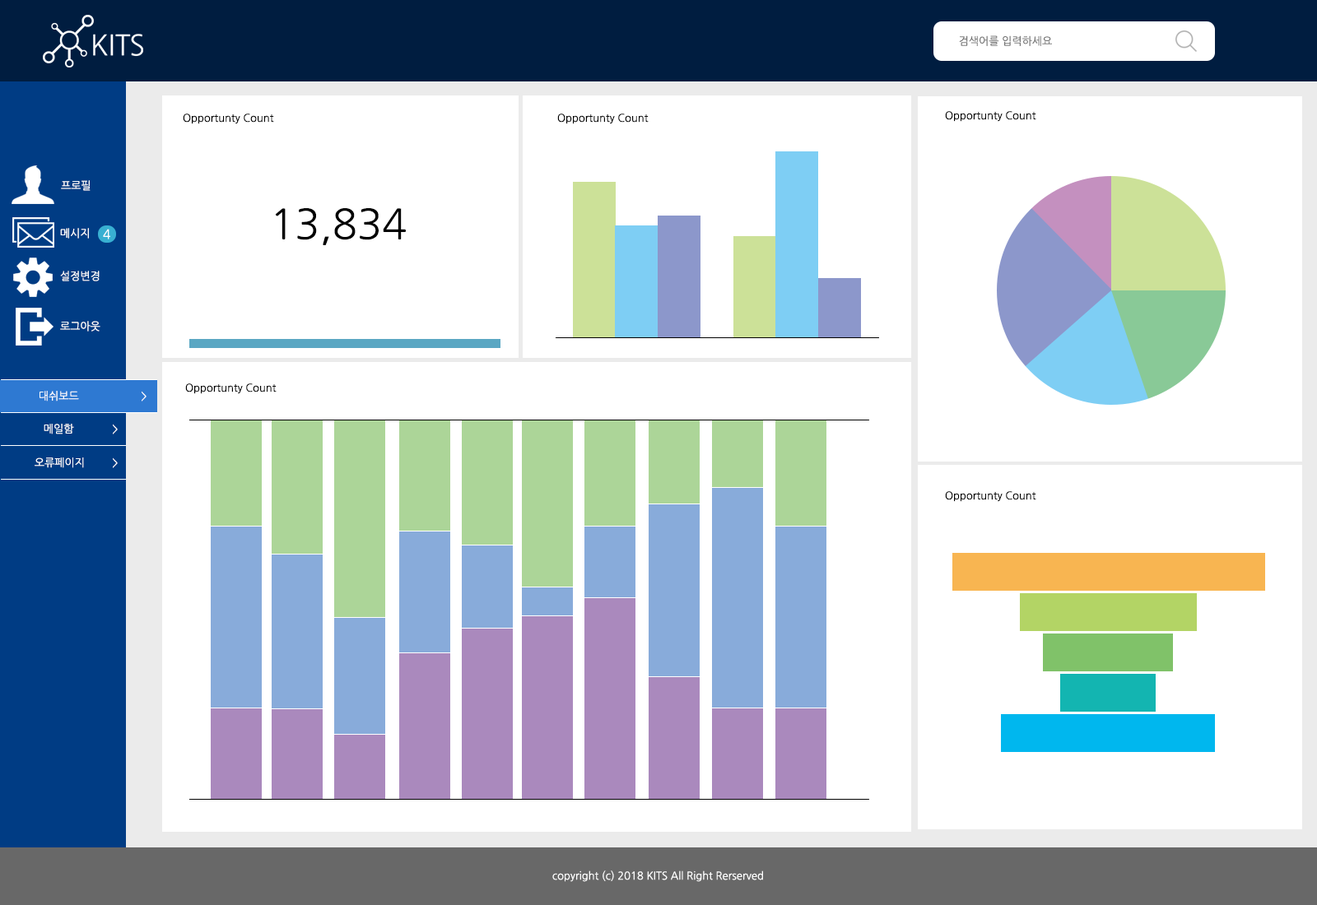
<style>
.page{position:relative;width:1317px;height:905px;background:#ffffff}
.page>*{position:absolute;margin:0}
.t1{font:10.7px "NanumGothic";color:#737373}
.t2{font:10.7px "NanumGothic";color:#000000}
.t3{font:10.7px "NanumGothic";color:#ffffff}
.t4{font:41.2px "NanumGothic";color:#000000}
.t5{font:12.8px "NanumGothic";color:#ffffff}
</style>
<div class="page">
<p class="t1" style="left:959px;top:35px;width:93px;height:11px">검색어를 입력하세요</p>
<p class="t2" style="left:183px;top:114px;width:91px;height:10px">Opportunty Count</p>
<p class="t2" style="left:557px;top:114px;width:92px;height:10px">Opportunty Count</p>
<p class="t2" style="left:945px;top:111px;width:91px;height:11px">Opportunty Count</p>
<p class="t3" style="left:61px;top:180px;width:30px;height:11px">프로필</p>
<p class="t4" style="left:275px;top:208px;width:131px;height:37px">13,834</p>
<p class="t3" style="left:60px;top:228px;width:29px;height:11px">메시지</p>
<p class="t5" style="left:103px;top:229px;width:7px;height:11px">4</p>
<p class="t3" style="left:60px;top:271px;width:40px;height:11px">설정변경</p>
<p class="t3" style="left:60px;top:321px;width:40px;height:11px">로그아웃</p>
<p class="t2" style="left:185px;top:384px;width:92px;height:10px">Opportunty Count</p>
<p class="t3" style="left:40px;top:391px;width:39px;height:11px">대쉬보드</p>
<p class="t3" style="left:142px;top:391px;width:5px;height:11px">&gt;</p>
<p class="t3" style="left:44px;top:424px;width:30px;height:11px">메일함</p>
<p class="t3" style="left:113px;top:424px;width:5px;height:11px">&gt;</p>
<p class="t3" style="left:35px;top:458px;width:49px;height:10px">오류페이지</p>
<p class="t3" style="left:113px;top:458px;width:5px;height:10px">&gt;</p>
<p class="t2" style="left:945px;top:491px;width:91px;height:11px">Opportunty Count</p>
<p class="t3" style="left:552px;top:871px;width:211px;height:11px">copyright (c) 2018 KITS All Right Rerserved</p>
</div>
